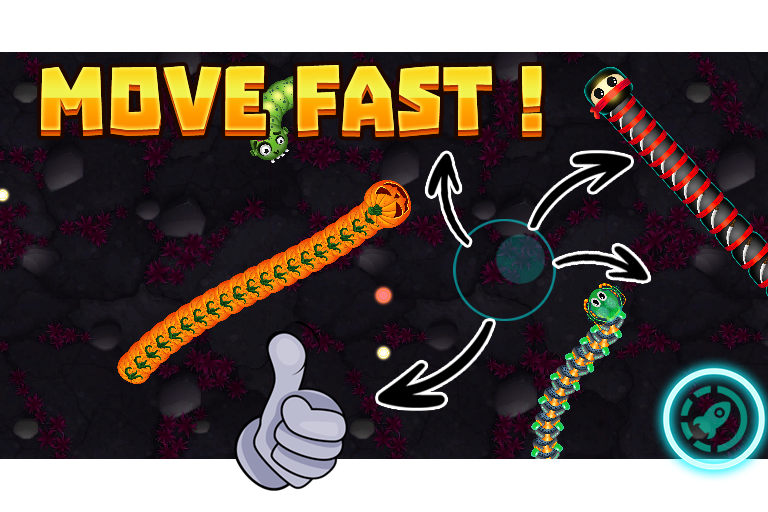
<style>
.page{position:relative;width:768px;height:512px}
.page>*{position:absolute;margin:0}
.t1{font:101.3px "Troika"}
</style>
<div class="page">
<p class="t1" style="left:41px;top:65px;width:501px;height:66px">Move Fast !</p>
</div>
